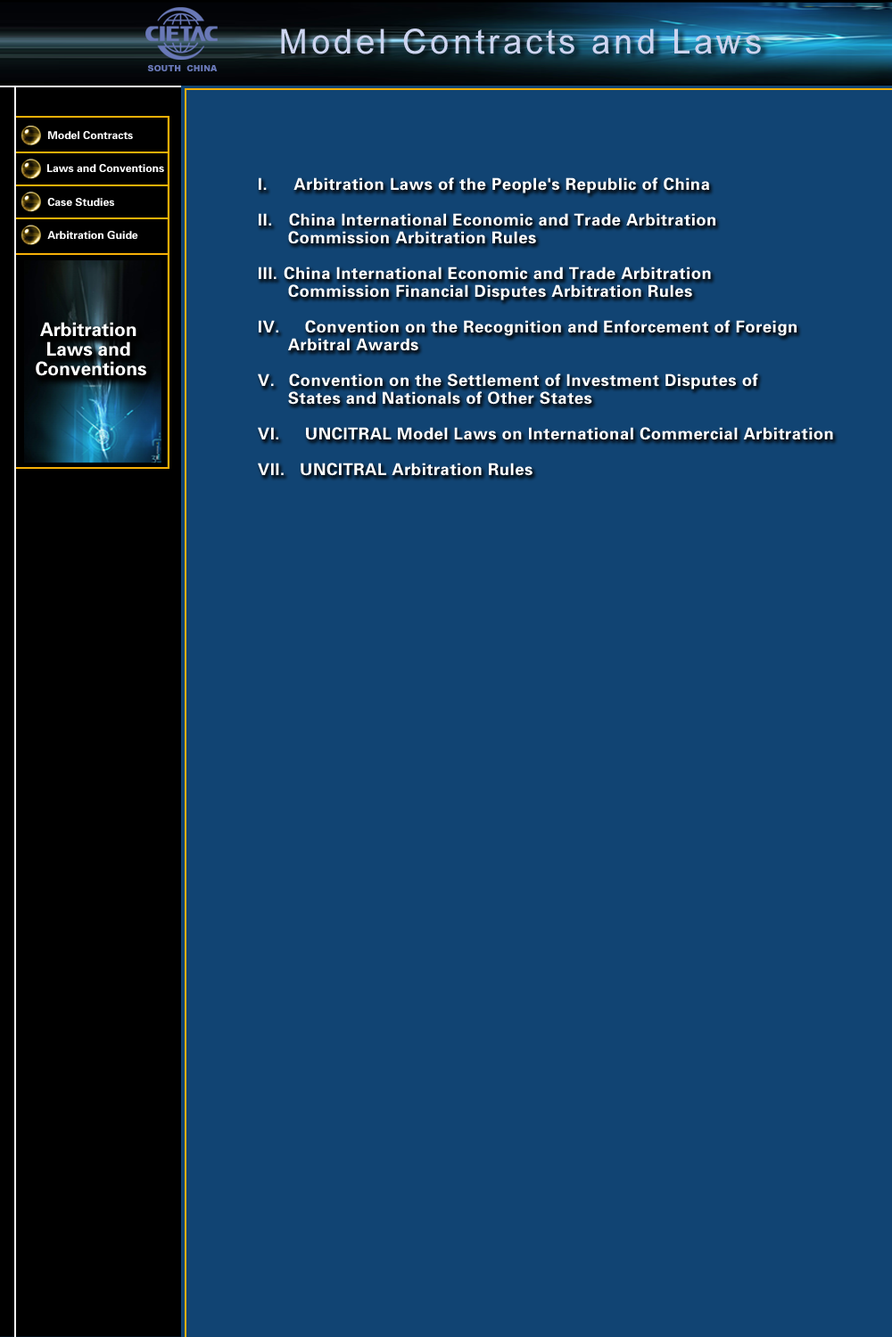
<style>
.page{position:relative;width:892px;height:1337px;background:#114473}
.page>*{position:absolute;margin:0}
.t1{font:10.9px "FZDHTJW--GB1-0";color:#ffffff}
.t2{font:16.6px/17.8px "FZDHTJW--GB1-0";letter-spacing:0.025em;color:#ffffff}
.t3{font:18.6px/19.6px "FZDHTJW--GB1-0";color:#ffffff}
</style>
<div class="page">
<p class="t1" style="left:48px;top:131px;width:85px;height:8px">Model Contracts</p>
<p class="t1" style="left:47px;top:164px;width:117px;height:8px">Laws and Conventions</p>
<p class="t2" style="left:258px;top:177px;width:575px;height:299px">I.    Arbitration Laws of the People's Republic of China<br><br>II.   China International Economic and Trade Arbitration <br>      Commission Arbitration Rules<br><br>III.  China International Economic and Trade Arbitration <br>      Commission Financial Disputes Arbitration Rules<br><br>IV.  Convention on the Recognition and Enforcement of Foreign<br>      Arbitral Awards<br><br>V.   Convention on the Settlement of Investment Disputes of <br>      States and Nationals of Other States <br><br>VI.  UNCITRAL Model Laws on International Commercial Arbitration<br><br>VII. UNCITRAL Arbitration Rules</p>
<p class="t1" style="left:47px;top:198px;width:67px;height:8px">Case Studies</p>
<p class="t1" style="left:47px;top:231px;width:91px;height:8px">Arbitration Guide</p>
<p class="t3" style="left:36px;top:322px;width:110px;height:54px;text-align:center">Arbitration <br>Laws and <br>Conventions</p>
</div>
